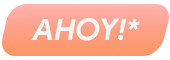
<style>
.page{position:relative;width:170px;height:60px}
.page>*{position:absolute;margin:0}
.t1{font:30px "ProductSans-BoldItalic";color:#f5f5f5}
</style>
<div class="page">
<p class="t1" style="left:31px;top:18px;width:109px;height:23px">AHOY!*</p>
</div>
